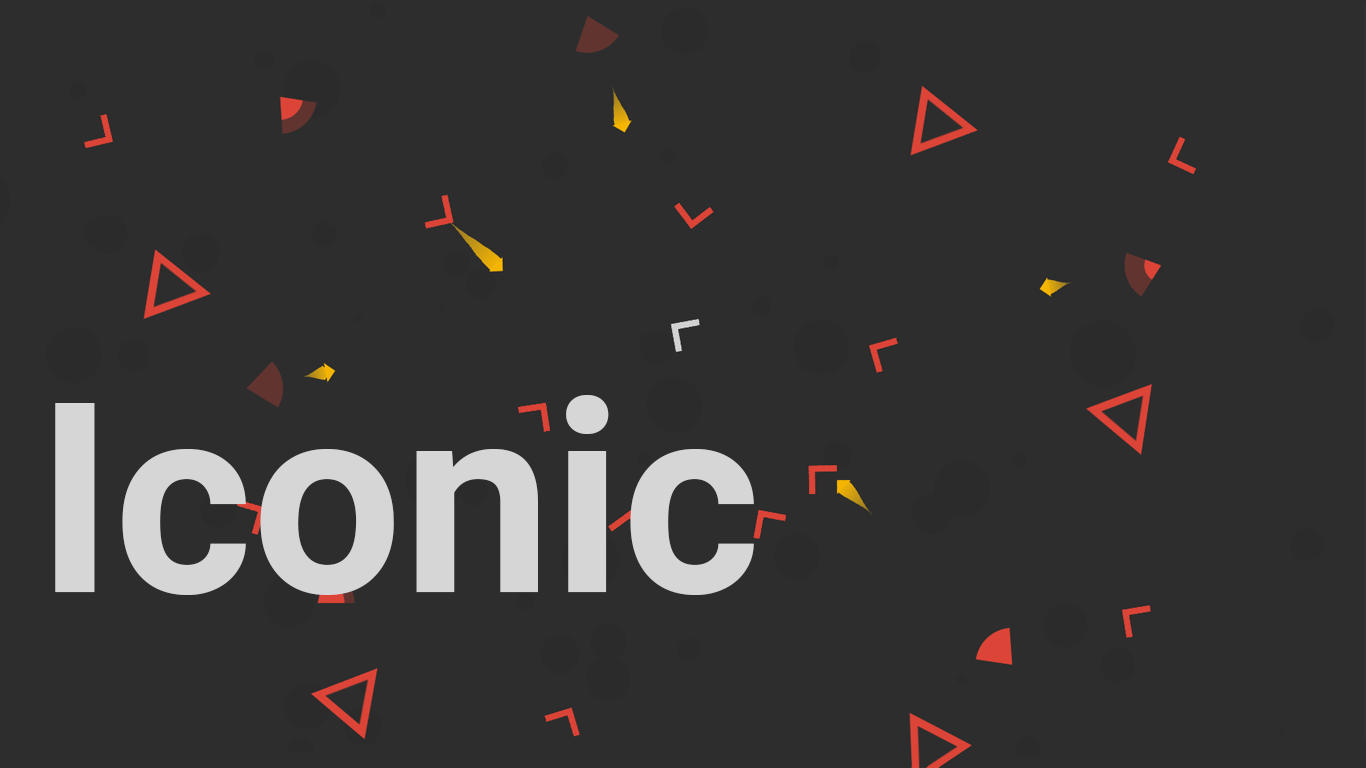
<style>
.page{position:relative;width:1366px;height:768px;background:#2d2d2d}
.page>*{position:absolute;margin:0}
.t1{font:265.9px "Roboto-Bold";color:#d6d6d6}
</style>
<div class="page">
<p class="t1" style="left:55px;top:395px;width:699px;height:200px">Iconic</p>
</div>
